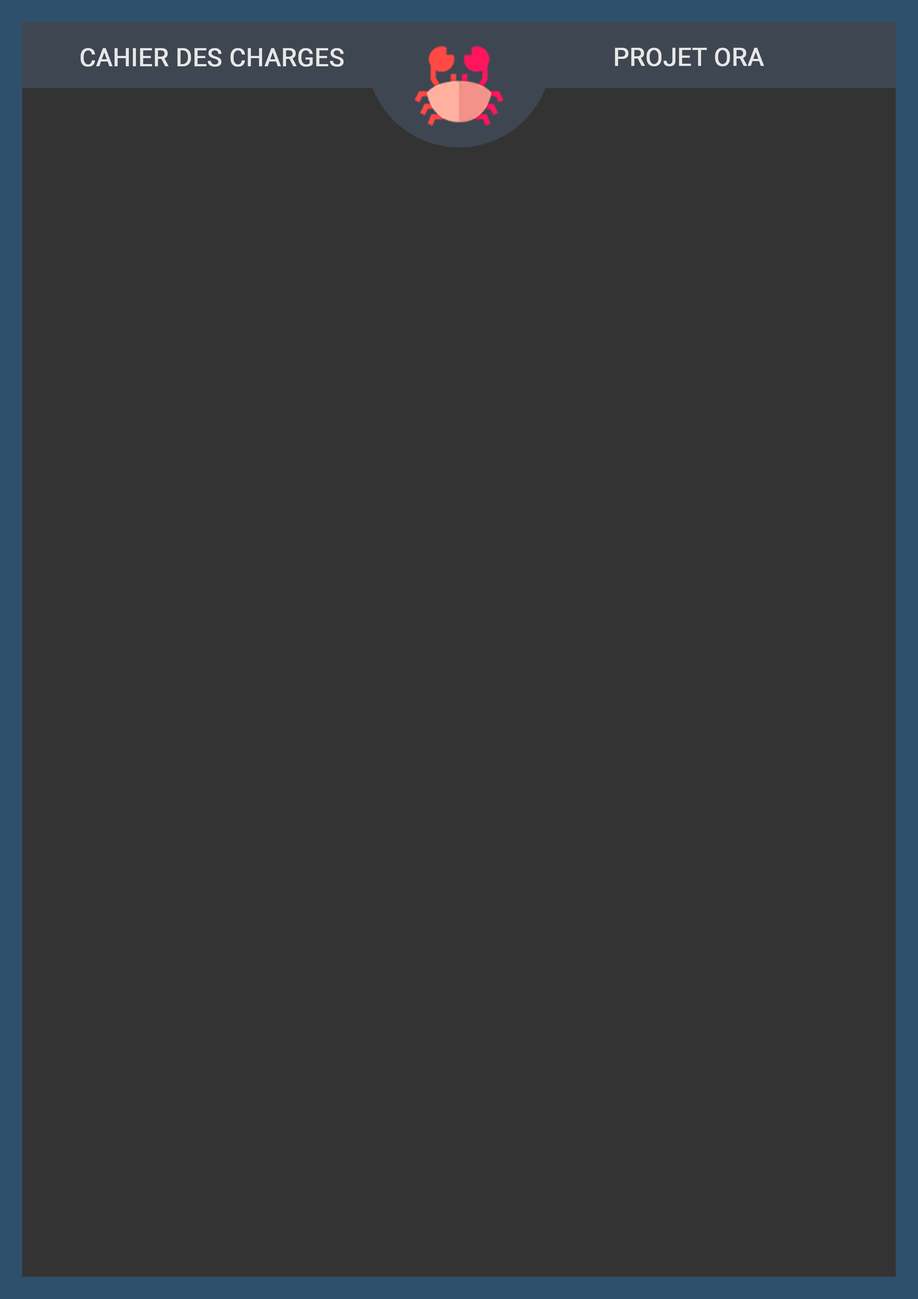
<style>
.page{position:relative;width:918px;height:1299px;background:#333333}
.page>*{position:absolute;margin:0}
.t1{font:24.7px "Roboto-Regular";color:#e7e7e7;font-weight:bold}
</style>
<div class="page">
<p class="t1" style="left:80px;top:48px;width:264px;height:19px">CAHIER DES CHARGES</p>
<p class="t1" style="left:615px;top:48px;width:149px;height:18px">PROJET ORA</p>
</div>
